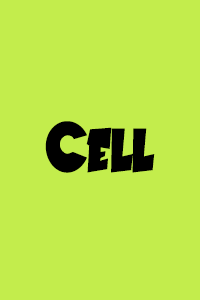
<style>
.page{position:relative;width:200px;height:300px;background:#c3ed4c}
.page>*{position:absolute;margin:0}
.t1{font:73px "SaiyanSans";color:#000000}
</style>
<div class="page">
<p class="t1" style="left:45px;top:121px;width:110px;height:52px">Cell</p>
</div>
